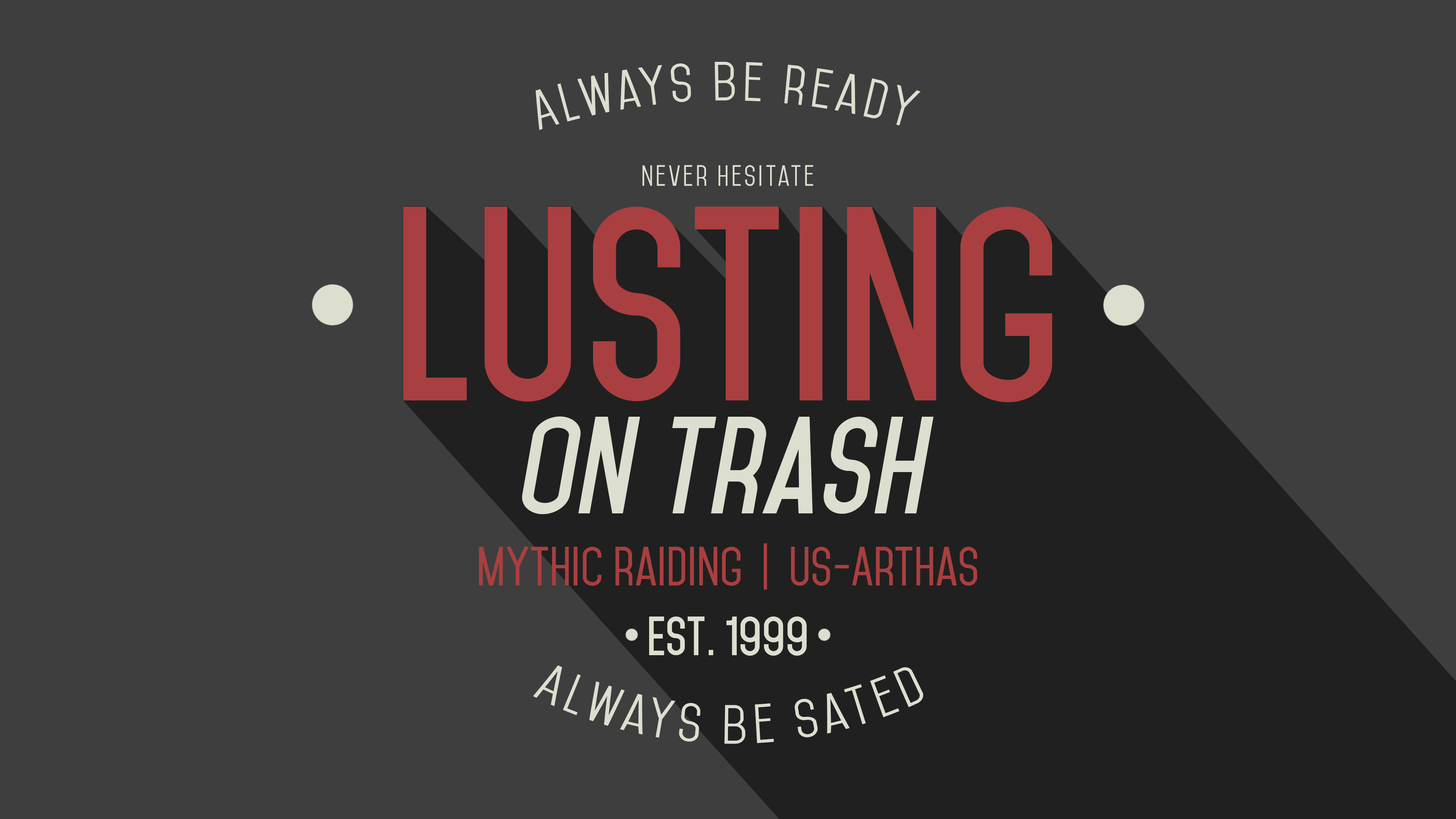
<style>
.page{position:relative;width:1456px;height:819px;background:#3e3e3e}
.page>*{position:absolute;margin:0}
.t1{font:47.4px "Mohave";letter-spacing:0.1em;color:#dcdfcf}
.t2{font:25.3px "Mohave";letter-spacing:0.1em;color:#dcdfcf}
.t3{font:237px "Mohave-Bold";color:#a93f40}
.t4{font:118.5px "Mohave-BoldItalic";color:#dcdfcf}
.t5{font:47.4px "Mohave-SemiBold";color:#a93f40}
.t6{font:47.4px "Mohave-Bold";color:#dcdfcf}
</style>
<div class="page">
<p class="t1" style="left:535px;top:61px;width:386px;height:69px">Always be ready</p>
<p class="t2" style="left:642px;top:165px;width:171px;height:21px">never hesitate</p>
<p class="t3" style="left:403px;top:207px;width:649px;height:195px">lusting</p>
<p class="t4" style="left:522px;top:416px;width:411px;height:98px">on trash</p>
<p class="t5" style="left:479px;top:543px;width:498px;height:47px">mythic raiding  |  US-Arthas</p>
<p class="t6" style="left:649px;top:617px;width:158px;height:39px">EST. 1999</p>
<p class="t1" style="left:533px;top:665px;width:390px;height:79px">Always be Sated</p>
</div>
